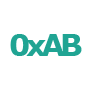
<style>
.page{position:relative;width:90px;height:90px;background:#ffffff}
.page>*{position:absolute;margin:0}
.t1{font:30px "Verdana-Bold";letter-spacing:-0.15em;color:#20a493}
</style>
<div class="page">
<p class="t1" style="left:10px;top:34px;width:72px;height:22px">0xAB</p>
</div>
